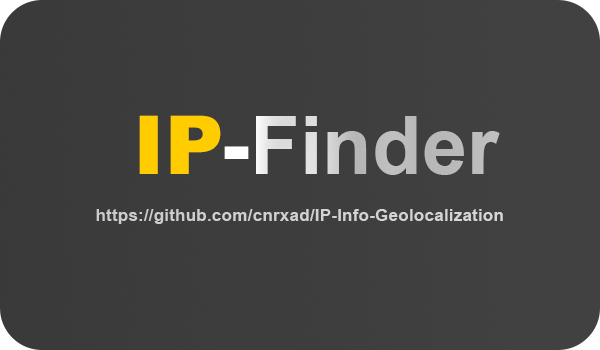
<style>
.page{position:relative;width:600px;height:350px}
.page>*{position:absolute;margin:0}
.t1{font:81.1px "Arial-BoldMT"}
.t2{font:81.1px "Arial-Black"}
.t3{font:17.5px "Arial-BoldMT";color:#d1d1d1}
</style>
<div class="page">
<p class="t1" style="left:139px;top:115px;width:361px;height:60px"><span class="t2">IP</span><span class="t2">-</span>Finder</p>
<p class="t3" style="left:96px;top:209px;width:407px;height:15px">https://github.com/cnrxad/IP-Info-Geolocalization</p>
</div>
